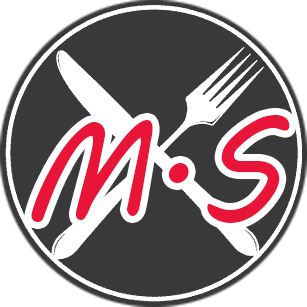
<style>
.page{position:relative;width:307px;height:307px;background:#39393b}
.page>*{position:absolute;margin:0}
.t1{font:135.4px "MVBoli";color:#e81538}
</style>
<div class="page">
<p class="t1" style="left:31px;top:115px;width:259px;height:108px">M.S</p>
</div>
